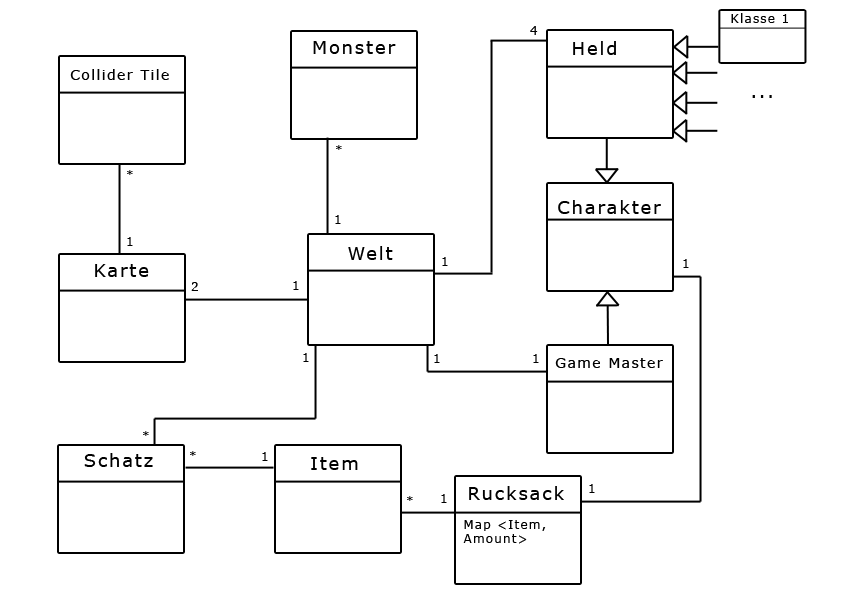
<style>
.page{position:relative;width:843px;height:603px;background:#ffffff}
.page>*{position:absolute;margin:0}
.t1{font:12px "Verdana";letter-spacing:0.1em;color:#000000}
.t2{font:18px "Verdana";letter-spacing:0.1em;color:#000000}
.t3{font:14px "Verdana";letter-spacing:0.1em;color:#000000}
</style>
<div class="page">
<p class="t1" style="left:731px;top:13px;width:57px;height:10px">Klasse 1</p>
<p class="t1" style="left:530px;top:26px;width:8px;height:9px">4</p>
<p class="t2" style="left:313px;top:41px;width:83px;height:13px">Monster</p>
<p class="t2" style="left:573px;top:41px;width:43px;height:14px">Held</p>
<p class="t3" style="left:70px;top:69px;width:99px;height:11px">Collider Tile</p>
<p class="t2" style="left:752px;top:95px;width:20px;height:3px">...</p>
<p class="t1" style="left:336px;top:145px;width:6px;height:5px">*</p>
<p class="t1" style="left:127px;top:170px;width:6px;height:5px">*</p>
<p class="t2" style="left:558px;top:200px;width:103px;height:14px">Charakter</p>
<p class="t1" style="left:335px;top:215px;width:6px;height:9px">1</p>
<p class="t1" style="left:127px;top:237px;width:6px;height:9px">1</p>
<p class="t2" style="left:348px;top:246px;width:45px;height:14px">Welt</p>
<p class="t1" style="left:442px;top:257px;width:6px;height:9px">1</p>
<p class="t2" style="left:95px;top:264px;width:54px;height:13px">Karte</p>
<p class="t1" style="left:683px;top:259px;width:6px;height:9px">1</p>
<p class="t1" style="left:293px;top:281px;width:6px;height:9px">1</p>
<p class="t1" style="left:191px;top:282px;width:7px;height:9px">2</p>
<p class="t1" style="left:303px;top:353px;width:6px;height:9px">1</p>
<p class="t1" style="left:434px;top:354px;width:6px;height:9px">1</p>
<p class="t1" style="left:533px;top:354px;width:6px;height:9px">1</p>
<p class="t3" style="left:555px;top:358px;width:108px;height:10px">Game Master</p>
<p class="t1" style="left:143px;top:431px;width:6px;height:5px">*</p>
<p class="t2" style="left:84px;top:453px;width:69px;height:14px">Schatz</p>
<p class="t1" style="left:190px;top:451px;width:6px;height:5px">*</p>
<p class="t1" style="left:262px;top:452px;width:6px;height:9px">1</p>
<p class="t2" style="left:311px;top:457px;width:47px;height:13px">Item</p>
<p class="t2" style="left:469px;top:486px;width:95px;height:14px">Rucksack</p>
<p class="t1" style="left:589px;top:484px;width:6px;height:9px">1</p>
<p class="t1" style="left:407px;top:496px;width:6px;height:5px">*</p>
<p class="t1" style="left:441px;top:494px;width:6px;height:9px">1</p>
<p class="t1" style="left:463px;top:520px;width:83px;height:24px">Map &lt;Item, Amount&gt;</p>
</div>
